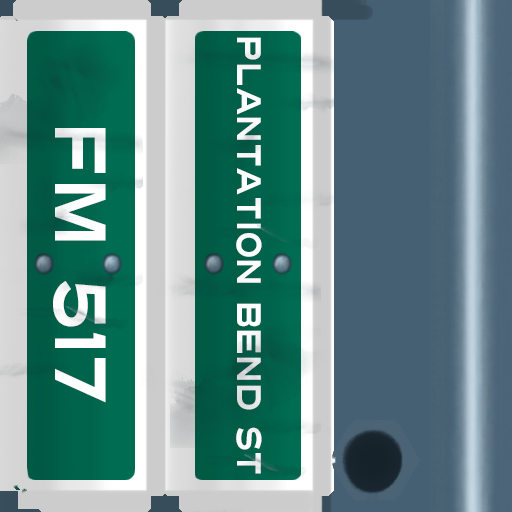
<style>
.page{position:relative;width:512px;height:512px}
.page>*{position:absolute;margin:0}
.t1{font:34px "Turnpike";color:#fefeff;scale:0.75 1}
.t2{font:72px "Turnpike";color:#fefeff;scale:0.75 1}
</style>
<div class="page">
<p class="t1" style="left:236px;top:37px;width:26px;height:437px;rotate:90deg">Plantation Bend St</p>
<p class="t2" style="left:53px;top:128px;width:53px;height:275px;rotate:90deg">fm 517</p>
</div>
